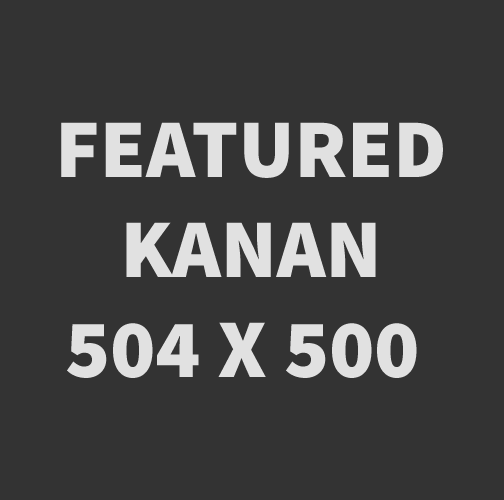
<style>
.page{position:relative;width:504px;height:500px;background:#333333}
.page>*{position:absolute;margin:0}
.t1{font:83.3px "SourceSansPro-Black";color:#e1e1e1}
</style>
<div class="page">
<p class="t1" style="left:61px;top:122px;width:382px;height:256px;text-align:center">FEATURED<br>KANAN<br>504 X 500</p>
</div>
